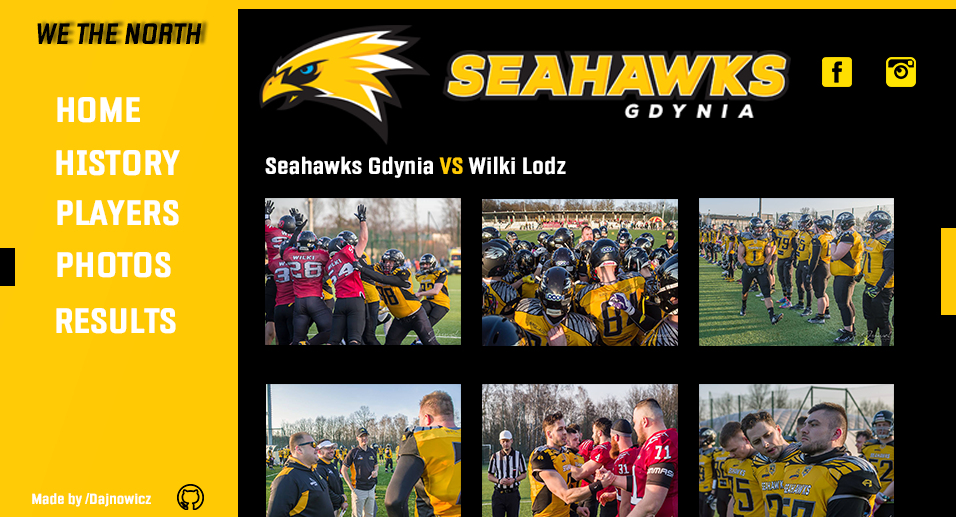
<style>
.page{position:relative;width:956px;height:517px;background:#000000}
.page>*{position:absolute;margin:0}
.t1{font:30px "Fragua-BoldItalic";color:#000000}
.t2{font:36px "Fragua-Bold";color:#ffffff}
.t3{font:24px "Fragua-Bold";color:#ffffff}
.t4{font:24px "Fragua-Bold";color:#ffca03}
.t5{font:15px "Fragua-Bold";color:#ffffff}
</style>
<div class="page">
<p class="t1" style="left:37px;top:23px;width:165px;height:21px">WE THE NORTH</p>
<p class="t2" style="left:57px;top:97px;width:83px;height:26px">HOME</p>
<p class="t2" style="left:56px;top:150px;width:124px;height:26px">HISTORY</p>
<p class="t3" style="left:265px;top:156px;width:301px;height:22px">Seahawks Gdynia <span class="t4">VS</span> Wilki Lodz</p>
<p class="t2" style="left:57px;top:200px;width:122px;height:26px">PLAYERS</p>
<p class="t2" style="left:57px;top:252px;width:114px;height:26px">PHOTOS</p>
<p class="t2" style="left:56px;top:308px;width:120px;height:26px">RESULTS</p>
<p class="t5" style="left:32px;top:493px;width:119px;height:14px">Made by /Dajnowicz</p>
</div>
